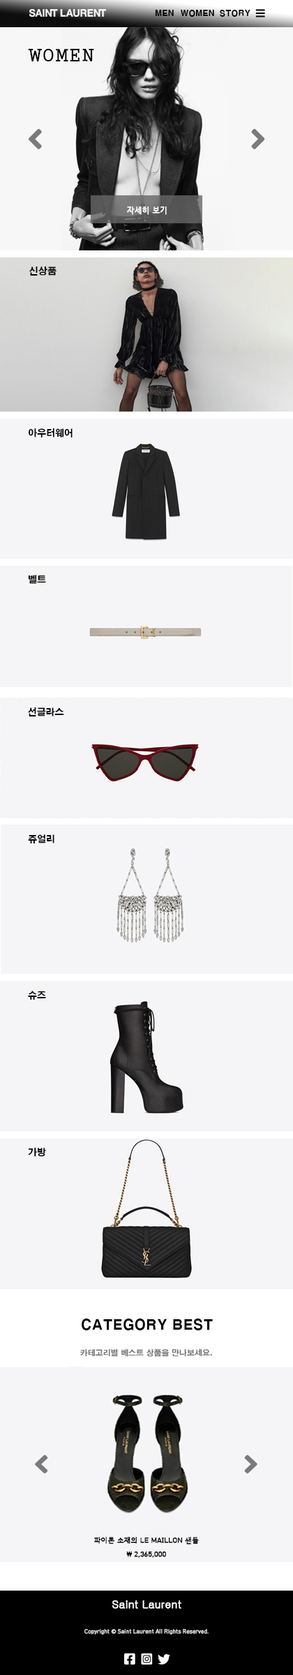
<style>
.page{position:relative;width:293px;height:1675px;background:#f5f5f7}
.page>*{position:absolute;margin:0}
.t1{font:8.1px "H2gtrE";color:#000000}
.t2{font:17.4px "H2gsrB";color:#000000}
.t3{font:7.7px "HCRDotum";color:#fefefe;font-weight:bold}
.t4{font:9.2px "H2gtrE";color:#000000}
.t5{font:9px "H2gtrE";color:#000000}
.t6{font:13.9px "H2gtrE";color:#000000}
.t7{font:16.7px "H2gtrE";color:#37baac}
.t8{font:7.7px/13.9px "H2gtrE";color:#737373}
.t9{font:7px/13.9px "HCRDotum";color:#000000;font-weight:bold}
.t10{font:10.7px "Gulim";color:#ffffff;font-weight:bold}
.t11{font:5.4px "HCRDotum";color:#d4d4d4;font-weight:bold}
</style>
<div class="page">
<p class="t1" style="left:155px;top:9px;width:19px;height:8px">MEN</p>
<p class="t1" style="left:181px;top:9px;width:33px;height:8px">WOMEN</p>
<p class="t1" style="left:220px;top:9px;width:30px;height:8px">STORY</p>
<p class="t2" style="left:28px;top:49px;width:66px;height:13px">WOMEN</p>
<p class="t3" style="left:127px;top:206px;width:40px;height:9px">자세히 보기</p>
<p class="t4" style="left:29px;top:266px;width:27px;height:9px">신상품</p>
<p class="t5" style="left:28px;top:428px;width:45px;height:9px">아우터웨어</p>
<p class="t5" style="left:28px;top:575px;width:18px;height:9px">벨트</p>
<p class="t5" style="left:28px;top:707px;width:36px;height:9px">선글라스</p>
<p class="t5" style="left:28px;top:834px;width:26px;height:9px">쥬얼리</p>
<p class="t5" style="left:28px;top:990px;width:18px;height:9px">슈즈</p>
<p class="t5" style="left:28px;top:1147px;width:18px;height:9px">가방</p>
<p class="t6" style="left:82px;top:1318px;width:131px;height:12px"><span class="t7"><br></span>CATEGORY BEST</p>
<p class="t8" style="left:80px;top:1348px;width:132px;height:9px;text-align:center">카테고리별 베스트 상품을 만나보세요.<br><br>카테고리별 베스트 상품을 만나보세요.</p>
<p class="t9" style="left:94px;top:1536px;width:105px;height:21px;text-align:center">파이톤 소재의 LE MAILLON 샌들<br>₩ 2,365,000</p>
<p class="t10" style="left:112px;top:1600px;width:69px;height:8px">Saint Laurent</p>
<p class="t11" style="left:84px;top:1629px;width:125px;height:5px">Copyright © Saint Laurent All Rights Reserved.</p>
</div>
